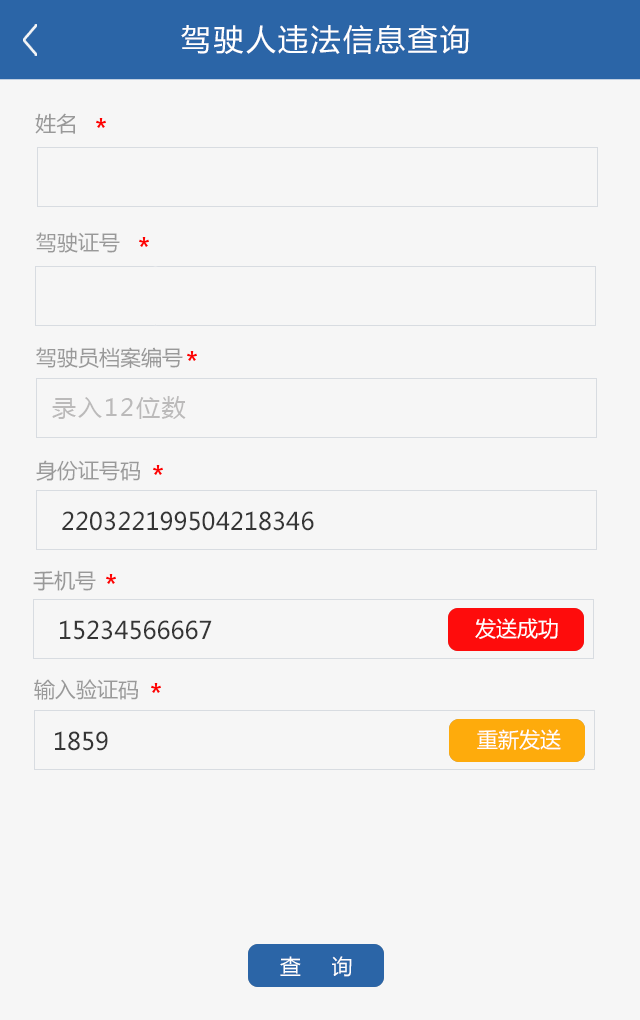
<style>
.page{position:relative;width:640px;height:1020px;background:#f6f6f6}
.page>*{position:absolute;margin:0}
.t1{font:30px "MicrosoftYaHei";letter-spacing:0.08em;color:#ffffff}
.t2{font:21px "MicrosoftYaHei";color:#999999}
.t3{font:24px "MicrosoftYaHei";letter-spacing:0.08em;color:#bbbaba}
.t4{font:24px "MicrosoftYaHei";color:#353535}
.t5{font:21px "MicrosoftYaHei";color:#ffffff}
.t6{font:21px "MicrosoftYaHei";letter-spacing:0.14em;color:#ffffff}
</style>
<div class="page">
<p class="t1" style="left:181px;top:24px;width:288px;height:30px">驾驶人违法信息查询</p>
<p class="t2" style="left:35px;top:113px;width:40px;height:21px">姓名</p>
<p class="t2" style="left:36px;top:232px;width:84px;height:21px">驾驶证号</p>
<p class="t2" style="left:36px;top:347px;width:147px;height:21px">驾驶员档案编号</p>
<p class="t3" style="left:52px;top:396px;width:134px;height:23px">录入12位数</p>
<p class="t2" style="left:36px;top:460px;width:104px;height:21px">身份证号码</p>
<p class="t4" style="left:62px;top:511px;width:252px;height:20px">220322199504218346</p>
<p class="t2" style="left:33px;top:570px;width:63px;height:21px">手机号</p>
<p class="t4" style="left:60px;top:620px;width:152px;height:20px">15234566667</p>
<p class="t5" style="left:475px;top:618px;width:83px;height:21px">发送成功</p>
<p class="t2" style="left:34px;top:679px;width:104px;height:21px">输入验证码</p>
<p class="t4" style="left:55px;top:731px;width:53px;height:20px">1859</p>
<p class="t5" style="left:477px;top:729px;width:84px;height:21px">重新发送</p>
<p class="t6" style="left:280px;top:956px;width:72px;height:21px">查   询</p>
</div>
